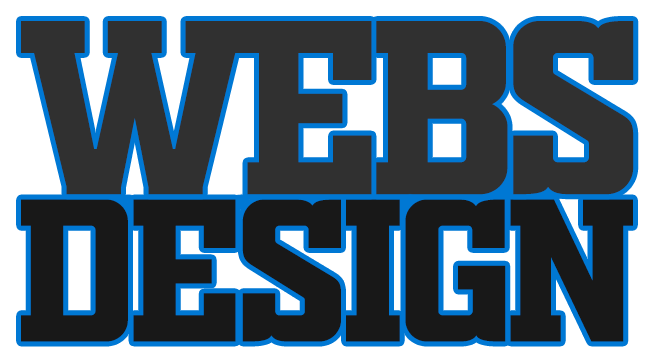
<style>
.page{position:relative;width:654px;height:362px;background:#303030}
.page>*{position:absolute;margin:0}
.t1{font:238.1px "OLDSPORT02ATHLETICNCV";letter-spacing:-0.065em;color:#303030}
.t2{font:195px "OLDSPORT02ATHLETICNCV";letter-spacing:-0.055em;color:#181818}
</style>
<div class="page">
<p class="t1" style="left:21px;top:21px;width:613px;height:174px">WEBS</p>
<p class="t2" style="left:21px;top:199px;width:612px;height:143px">DESIGN</p>
</div>
